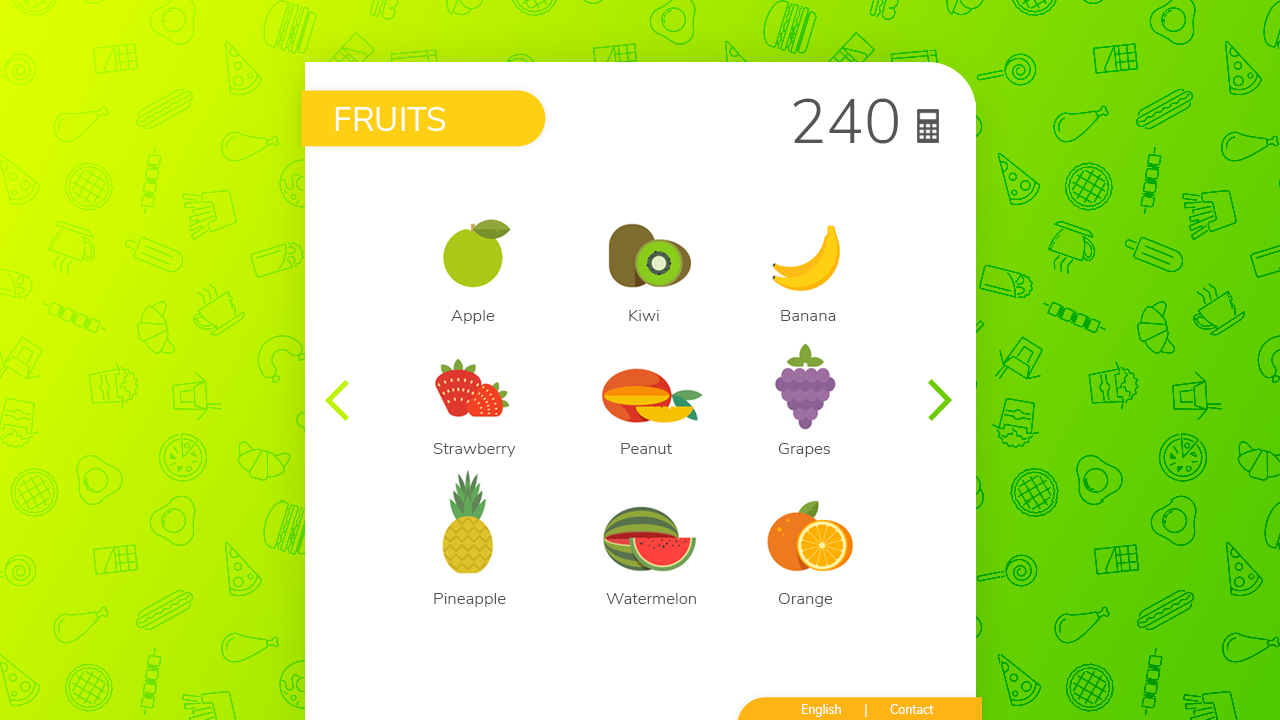
<style>
.page{position:relative;width:1280px;height:720px;background:#ffffff}
.page>*{position:absolute;margin:0}
.t1{font:62.5px "NunitoSans-Light";color:#555555}
.t2{font:33.3px "NunitoSans-Regular";color:#ffffff}
.t3{font:16.7px "NunitoSans-Light";color:#515151}
.t4{font:12.5px "NunitoSans-Regular";color:#ffffff}
</style>
<div class="page">
<p class="t1" style="left:793px;top:98px;width:105px;height:46px">240</p>
<p class="t2" style="left:335px;top:107px;width:110px;height:24px">FRUITS</p>
<p class="t3" style="left:451px;top:310px;width:44px;height:14px">Apple</p>
<p class="t3" style="left:629px;top:310px;width:30px;height:11px">Kiwi</p>
<p class="t3" style="left:781px;top:310px;width:55px;height:11px">Banana</p>
<p class="t3" style="left:433px;top:443px;width:83px;height:14px">Strawberry</p>
<p class="t3" style="left:621px;top:443px;width:51px;height:11px">Peanut</p>
<p class="t3" style="left:778px;top:443px;width:52px;height:14px">Grapes</p>
<p class="t3" style="left:434px;top:593px;width:72px;height:14px">Pineapple</p>
<p class="t3" style="left:606px;top:593px;width:90px;height:11px">Watermelon</p>
<p class="t3" style="left:778px;top:593px;width:55px;height:14px">Orange</p>
<p class="t4" style="left:802px;top:704px;width:65px;height:13px">English       |</p>
<p class="t4" style="left:890px;top:704px;width:44px;height:10px">Contact</p>
</div>
